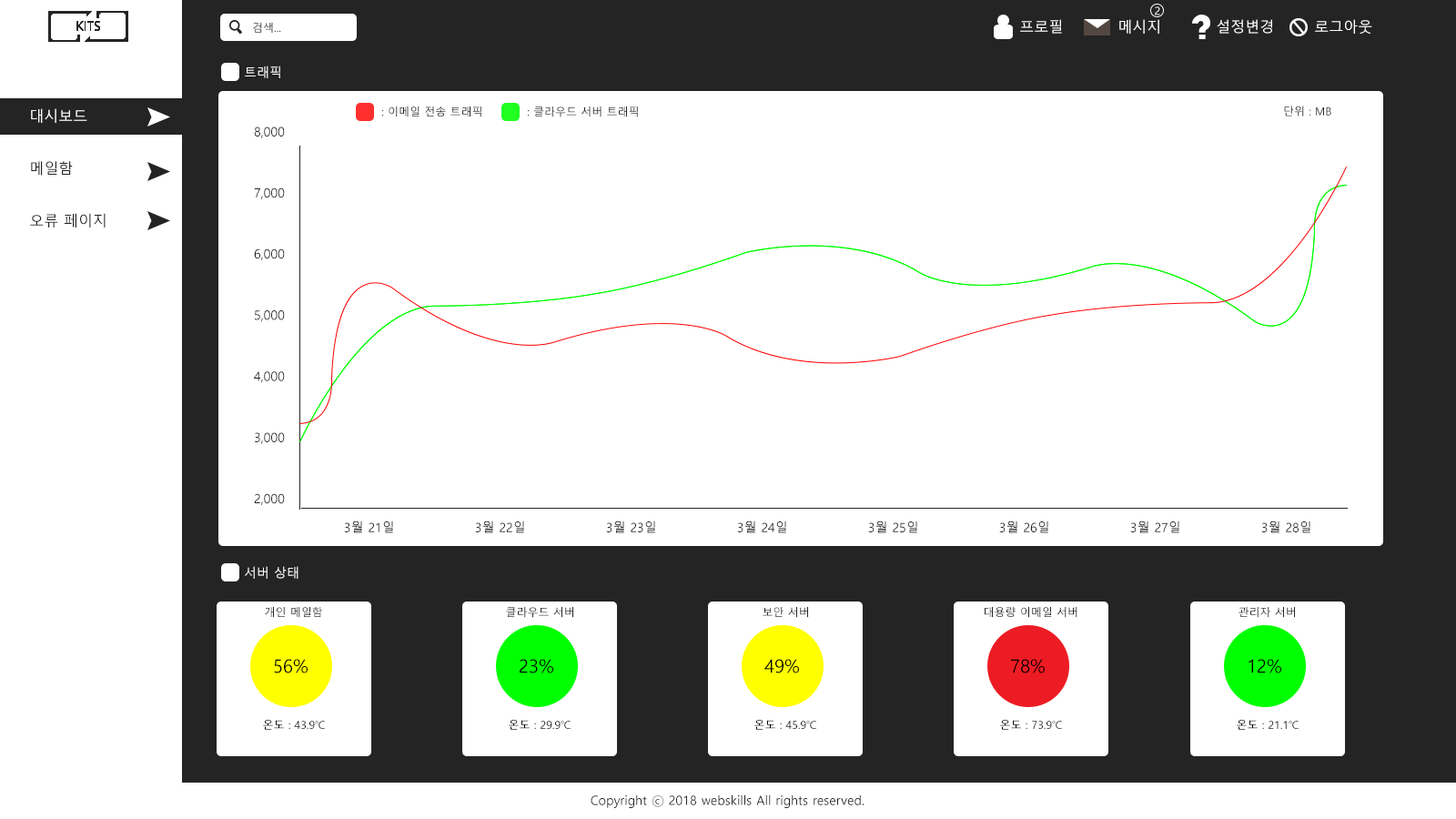
<style>
.page{position:relative;width:1456px;height:819px;background:#ffffff}
.page>*{position:absolute;margin:0}
.t1{font:10.9px "MalgunGothic"}
.t2{font:14.6px "MalgunGothic";color:#ffffff}
.t3{font:12.7px "MalgunGothic";color:#ffffff}
.t4{font:10.9px "MalgunGothic";color:#242424}
.t5{font:12.7px "MalgunGothic";color:#242424}
.t6{font:18.2px "MalgunGothic";color:#000000}
.t7{font:10.9px "MalgunGothic";color:#000000}
</style>
<div class="page">
<p class="t1" style="left:1155px;top:6px;width:5px;height:9px">2</p>
<p class="t1" style="left:253px;top:22px;width:28px;height:11px">검색...</p>
<p class="t2" style="left:1020px;top:19px;width:352px;height:15px">프로필  메시지  설정변경  로그아웃</p>
<p class="t3" style="left:245px;top:66px;width:35px;height:12px">트래픽</p>
<p class="t4" style="left:382px;top:106px;width:99px;height:11px">: 이메일 전송 트래픽</p>
<p class="t4" style="left:528px;top:106px;width:110px;height:11px">: 클라우드 서버 트래픽</p>
<p class="t4" style="left:1284px;top:106px;width:47px;height:10px">단위 : MB</p>
<p class="t5" style="left:254px;top:126px;width:31px;height:379px">8,000<br><br><br><br>7,000<br><br><br><br>6,000<br><br><br><br>5,000<br><br><br><br>4,000<br><br><br><br>3,000<br><br><br><br>2,000</p>
<p class="t5" style="left:344px;top:521px;width:966px;height:12px">3월 21일   3월 22일   3월 23일   3월 24일   3월 25일   3월 26일   3월 27일   3월 28일</p>
<p class="t3" style="left:245px;top:566px;width:53px;height:13px">서버 상태</p>
<p class="t4" style="left:265px;top:607px;width:57px;height:11px">개인 메일함</p>
<p class="t4" style="left:506px;top:607px;width:67px;height:11px">클라우드 서버</p>
<p class="t4" style="left:763px;top:607px;width:45px;height:11px">보안 서버</p>
<p class="t4" style="left:985px;top:607px;width:92px;height:11px">대용량 이메일 서버</p>
<p class="t4" style="left:1238px;top:607px;width:57px;height:11px">관리자 서버</p>
<p class="t6" style="left:274px;top:659px;width:34px;height:14px">56%</p>
<p class="t6" style="left:520px;top:659px;width:33px;height:14px">23%</p>
<p class="t6" style="left:764px;top:659px;width:35px;height:14px">49%</p>
<p class="t6" style="left:1011px;top:659px;width:34px;height:14px">78%</p>
<p class="t6" style="left:1249px;top:659px;width:32px;height:14px">12%</p>
<p class="t7" style="left:263px;top:720px;width:62px;height:10px">온도 : 43.9℃</p>
<p class="t7" style="left:509px;top:720px;width:62px;height:10px">온도 : 29.9℃</p>
<p class="t7" style="left:754px;top:720px;width:62px;height:10px">온도 : 45.9℃</p>
<p class="t7" style="left:1000px;top:720px;width:62px;height:10px">온도 : 73.9℃</p>
<p class="t7" style="left:1237px;top:720px;width:62px;height:10px">온도 : 21.1℃</p>
<p class="t5" style="left:591px;top:794px;width:273px;height:14px">Copyright ⓒ 2018 webskills All rights reserved.</p>
</div>
